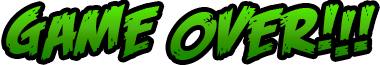
<style>
.page{position:relative;width:380px;height:65px;background:#000000}
.page>*{position:absolute;margin:0}
.t1{font:66.7px "FeastofFleshBBItalic";letter-spacing:0.04em}
.t2{font:72.7px "FeastofFleshBBItalic";letter-spacing:0.04em;scale:0.92 1}
.t3{font:66.7px "FeastofFleshBBItalic";letter-spacing:0.08em}
.t4{font:66.7px "FeastofFleshBBItalic";letter-spacing:0.1em}
.t5{font:66.7px "FeastofFleshBBItalic";letter-spacing:0.02em}
</style>
<div class="page">
<p class="t1" style="left:6px;top:4px;width:369px;height:56px">ga<span class="t2">m</span>e <span class="t3">o</span>v<span class="t3">e</span><span class="t4">r</span><span class="t5">!</span>!!</p>
</div>
